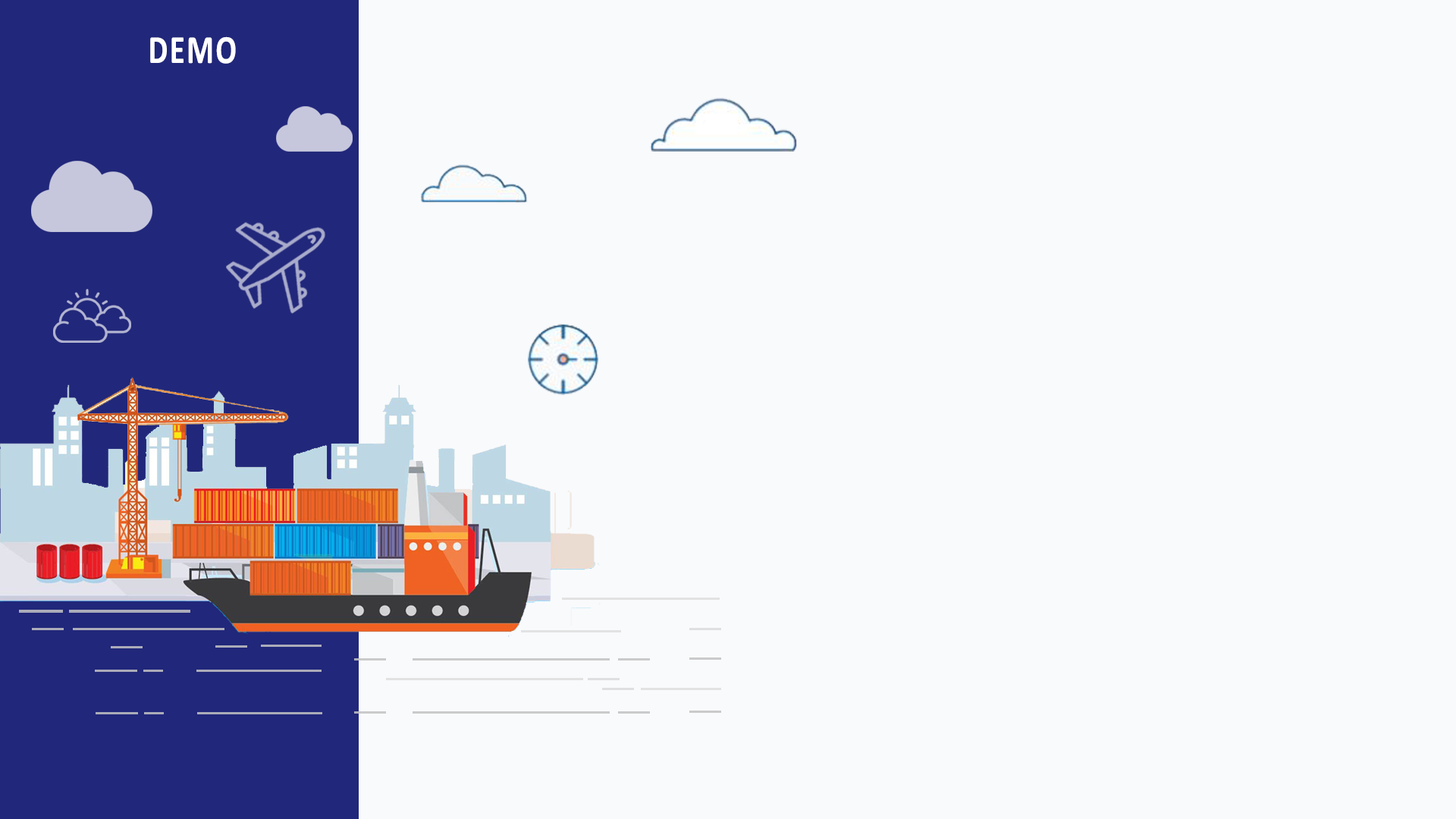
<style>
.page{position:relative;width:1456px;height:819px;background:#f9fafc}
.page>*{position:absolute;margin:0}
.t1{font:40.1px "Calibri-Bold";letter-spacing:0.06em;color:#ffffff;scale:0.77 1}
</style>
<div class="page">
<p class="t1" style="left:150px;top:36px;width:86px;height:28px">DEMO</p>
</div>
